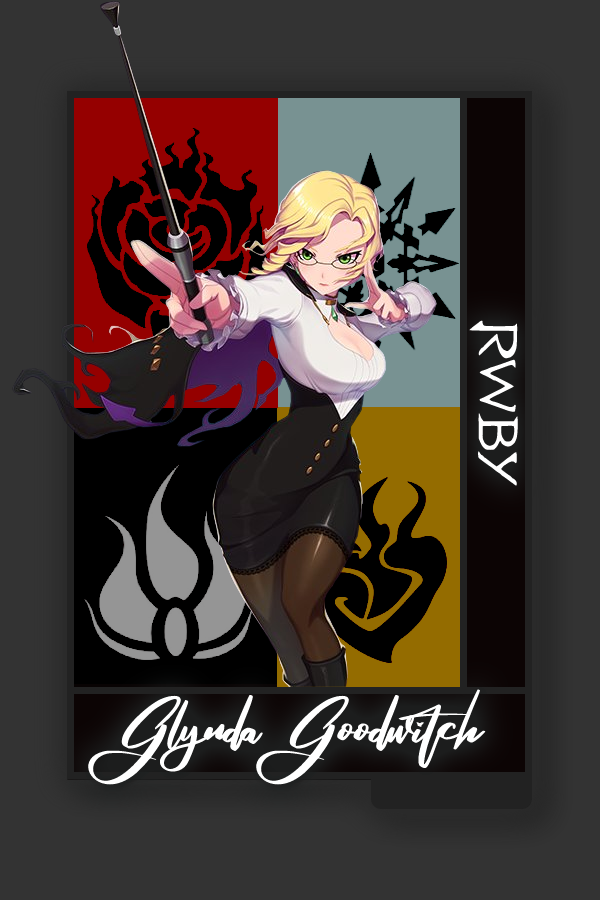
<style>
.page{position:relative;width:600px;height:900px;background:#333333}
.page>*{position:absolute;margin:0}
.t1{font:61.3px "RWBY_Style";color:#ffffff;scale:1.25 1}
.t2{font:75px "RosegaFREE";color:#ffffff}
</style>
<div class="page">
<p class="t1" style="left:469px;top:320px;width:49px;height:166px;rotate:90deg">RWBY</p>
<p class="t2" style="left:69px;top:689px;width:417px;height:116px">Glynda Goodwitch</p>
</div>
